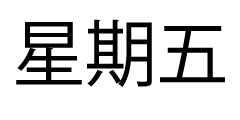
<style>
.page{position:relative;width:240px;height:120px;background:#ffffff}
.page>*{position:absolute;margin:0}
.t1{font:72.6px "KozGoPr6N-Regular";color:#000101}
</style>
<div class="page">
<p class="t1" style="left:16px;top:19px;width:209px;height:68px">星期五</p>
</div>
